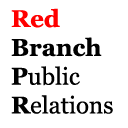
<style>
.page{position:relative;width:128px;height:128px;background:#ffffff}
.page>*{position:absolute;margin:0}
.t1{font:24px "Georgia-Bold";color:#000000}
.t2{font:24px "Georgia-Bold";color:#ff0000}
.t3{font:24px "Georgia";color:#000000}
</style>
<div class="page">
<p class="t1" style="left:11px;top:8px;width:102px;height:106px"><span class="t2">Red<br></span>Branch<br>P<span class="t3">ublic<br></span>R<span class="t3">elations</span></p>
</div>
